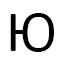
<style>
.page{position:relative;width:64px;height:64px;background:#ffffff}
.page>*{position:absolute;margin:0}
.t1{font:58.3px "Calibri";color:#000000}
</style>
<div class="page">
<p class="t1" style="left:10px;top:13px;width:44px;height:39px">Ю</p>
</div>
